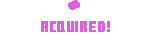
<style>
.page{position:relative;width:150px;height:42px;background:#ffffff}
.page>*{position:absolute;margin:0}
.t1{font:15px "MinecraftTen";color:#e55ae5}
</style>
<div class="page">
<p class="t1" style="left:41px;top:21px;width:69px;height:11px">ACQUIRED!</p>
</div>
